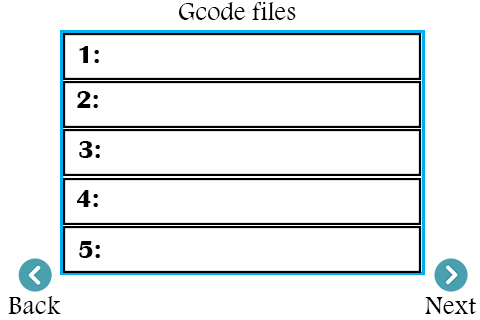
<style>
.page{position:relative;width:480px;height:320px;background:#ffffff}
.page>*{position:absolute;margin:0}
.t1{font:26.5px "Arash";color:#000000}
.t2{font:26.5px "BritannicBold";color:#000000}
</style>
<div class="page">
<p class="t1" style="left:178px;top:2px;width:118px;height:18px">Gcode files</p>
<p class="t2" style="left:79px;top:46px;width:20px;height:17px">:1</p>
<p class="t2" style="left:77px;top:91px;width:21px;height:17px">:2</p>
<p class="t2" style="left:79px;top:141px;width:21px;height:17px">:3</p>
<p class="t2" style="left:77px;top:190px;width:21px;height:17px">:4</p>
<p class="t2" style="left:79px;top:241px;width:21px;height:17px">:5</p>
<p class="t1" style="left:8px;top:296px;width:53px;height:18px">Back</p>
<p class="t1" style="left:425px;top:297px;width:51px;height:17px">Next</p>
</div>
